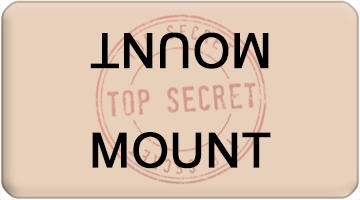
<style>
.page{position:relative;width:360px;height:200px;background:#e8d0bb}
.page>*{position:absolute;margin:0}
.t1{font:48px "ArialMT";color:#000000;font-weight:bold}
</style>
<div class="page">
<p class="t1" style="left:90px;top:32px;width:179px;height:37px;rotate:180deg">MOUNT</p>
<p class="t1" style="left:92px;top:132px;width:179px;height:37px">MOUNT</p>
</div>
